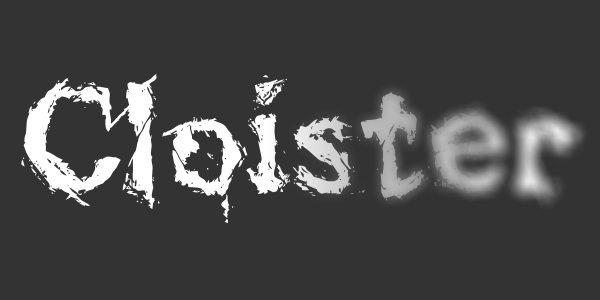
<style>
.page{position:relative;width:600px;height:300px;background:#333333}
.page>*{position:absolute;margin:0}
.t1{font:170px "BlackAsylum";letter-spacing:0.05em}
</style>
<div class="page">
<p class="t1" style="left:21px;top:74px;width:559px;height:149px">Cloister</p>
</div>
